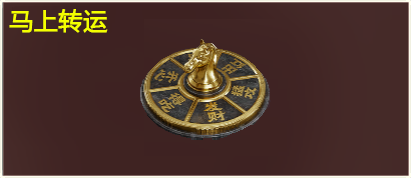
<style>
.page{position:relative;width:411px;height:178px}
.page>*{position:absolute;margin:0}
.t1{font:24px "MicrosoftYaHeiUI";color:#f4ff00;font-weight:bold}
</style>
<div class="page">
<p class="t1" style="left:9px;top:9px;width:99px;height:24px">马上转运</p>
</div>
